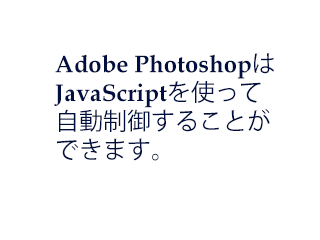
<style>
.page{position:relative;width:320px;height:240px;background:#ffffff}
.page>*{position:absolute;margin:0}
.t1{font:24px "KozGoPr6N-Regular";color:#000f40}
.t2{font:24px "Palatino-Bold";color:#000f40}
</style>
<div class="page">
<p class="t1" style="left:54px;top:53px;width:220px;height:108px"><span class="t2">Adobe Photoshop</span>は<span class="t2">JavaScript</span>を使って自動制御することができます。</p>
</div>
